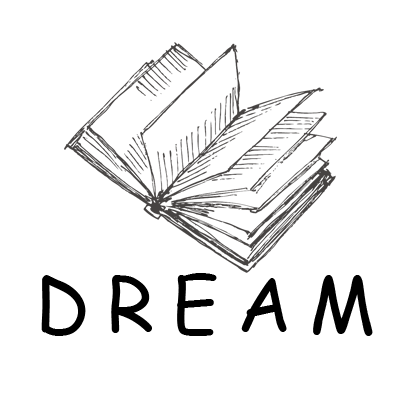
<style>
.page{position:relative;width:400px;height:400px;background:#ffffff}
.page>*{position:absolute;margin:0}
.t1{font:75px "ComicSansMS";letter-spacing:0.24em;color:#000000}
</style>
<div class="page">
<p class="t1" style="left:41px;top:273px;width:332px;height:63px">DREAM</p>
</div>
